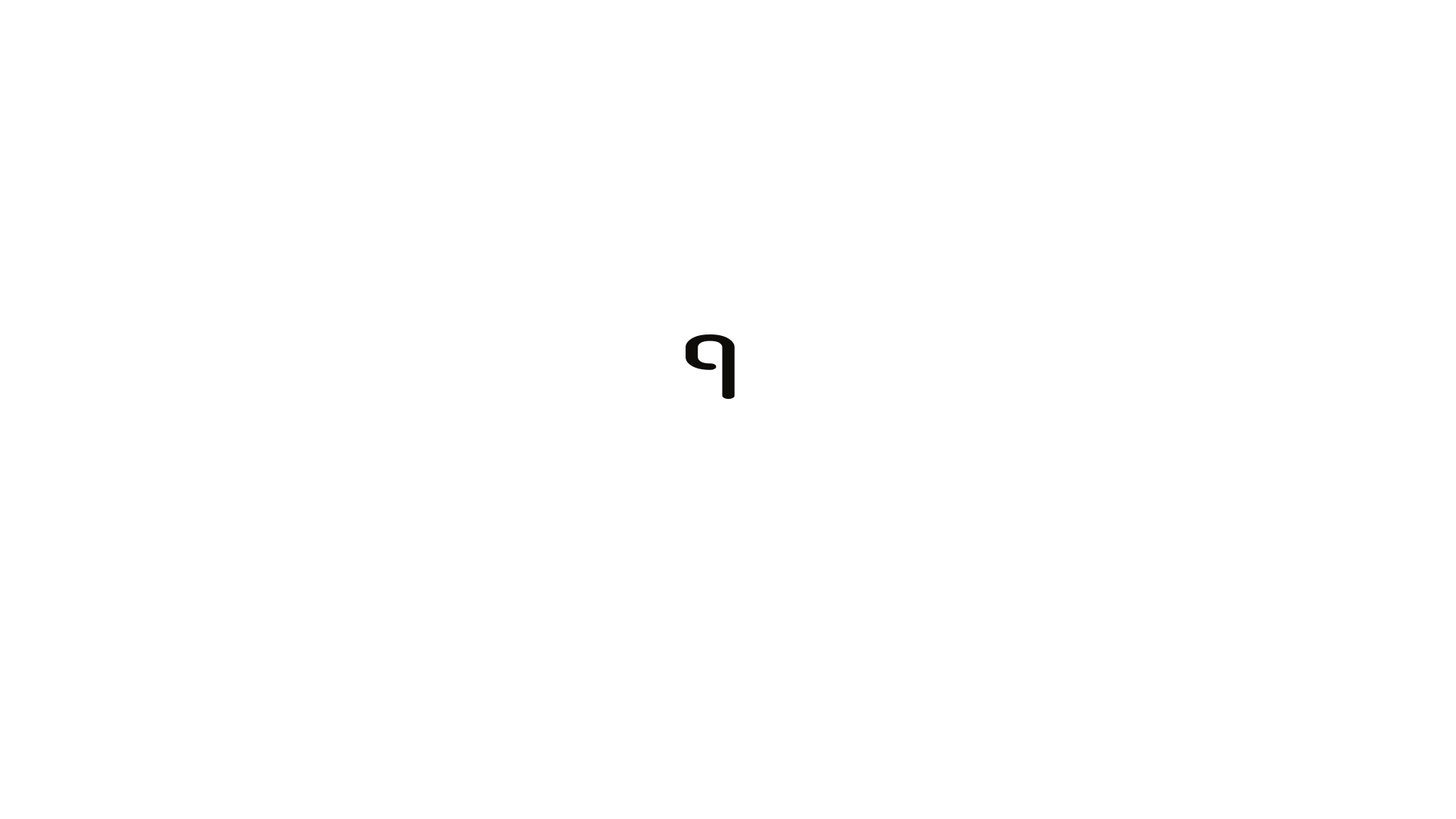
<style>
.page{position:relative;width:1456px;height:819px;background:#ffffff}
.page>*{position:absolute;margin:0}
.t1{font:78.9px "TelephasicBRK";letter-spacing:-0.01em;color:#0d0c09;text-transform:uppercase}
</style>
<div class="page">
<p class="t1" style="left:686px;top:334px;width:49px;height:65px">9</p>
</div>
